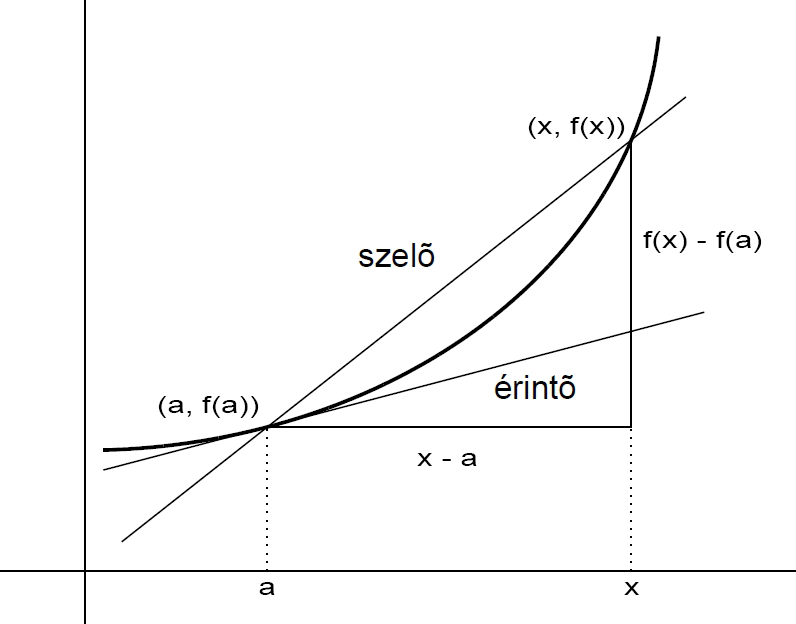
<style>
.page{position:relative;width:796px;height:624px;background:#ffffff}
.page>*{position:absolute;margin:0}
.t1{font:24px "ArialMT";color:#000000;scale:1.3 1}
</style>
<div class="page">
<p class="t1" style="left:528px;top:117px;width:97px;height:22px">(x, f(x))</p>
<p class="t1" style="left:643px;top:231px;width:119px;height:22px">f(x) - f(a)</p>
<p class="t1" style="left:158px;top:396px;width:101px;height:22px">(a, f(a))</p>
<p class="t1" style="left:417px;top:453px;width:60px;height:13px">x - a</p>
<p class="t1" style="left:259px;top:582px;width:16px;height:13px">a</p>
<p class="t1" style="left:624px;top:582px;width:16px;height:13px">x</p>
</div>
